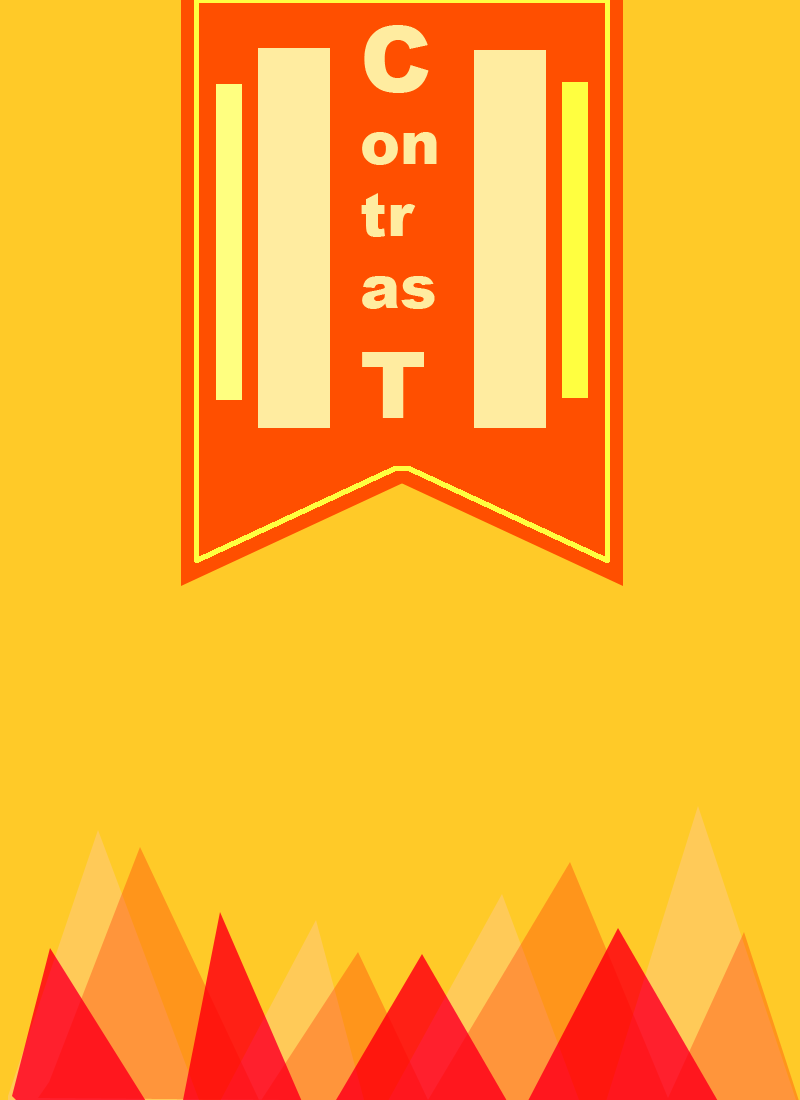
<style>
.page{position:relative;width:800px;height:1100px;background:#ffca28}
.page>*{position:absolute;margin:0}
.t1{font:60px "Arial-Black";color:#ffeca0}
.t2{font:92px "Arial-Black";color:#ffeca0}
</style>
<div class="page">
<p class="t1" style="left:361px;top:25px;width:76px;height:393px"><span class="t2">C<br></span>on<br>tr<br>as<br><span class="t2">T</span></p>
</div>
